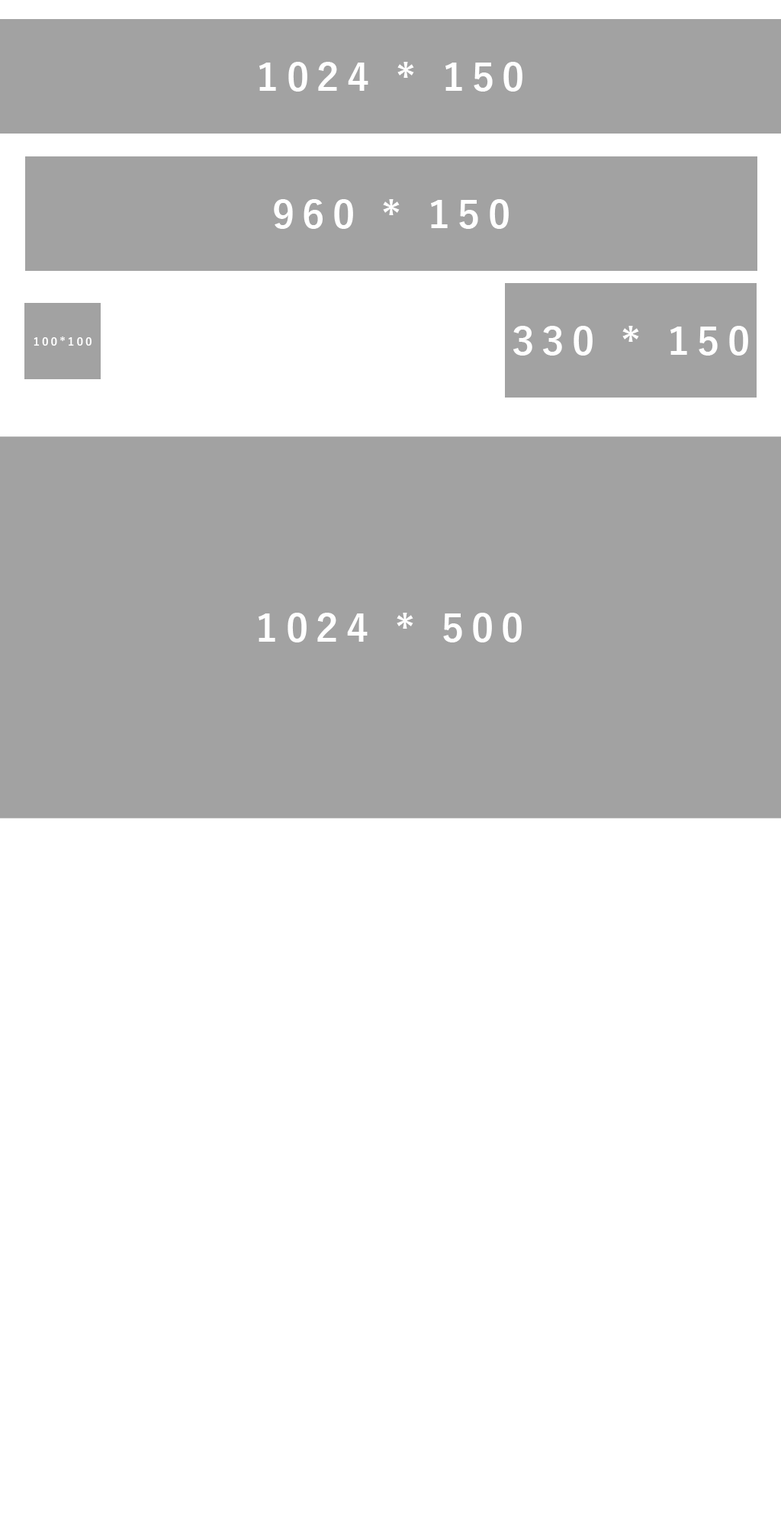
<style>
.page{position:relative;width:781px;height:1526px;background:#ffffff}
.page>*{position:absolute;margin:0}
.t1{font:38.9px "YuGothic-Bold";letter-spacing:0.2em;color:#ffffff}
.t2{font:11.4px "YuGothic-Bold";letter-spacing:0.2em;color:#ffffff}
</style>
<div class="page">
<p class="t1" style="left:259px;top:62px;width:264px;height:30px">1024 * 150</p>
<p class="t1" style="left:274px;top:199px;width:235px;height:30px">960 * 150</p>
<p class="t1" style="left:514px;top:326px;width:235px;height:30px">330 * 150</p>
<p class="t2" style="left:34px;top:337px;width:58px;height:9px">100*100</p>
<p class="t1" style="left:259px;top:613px;width:263px;height:29px">1024 * 500</p>
</div>
